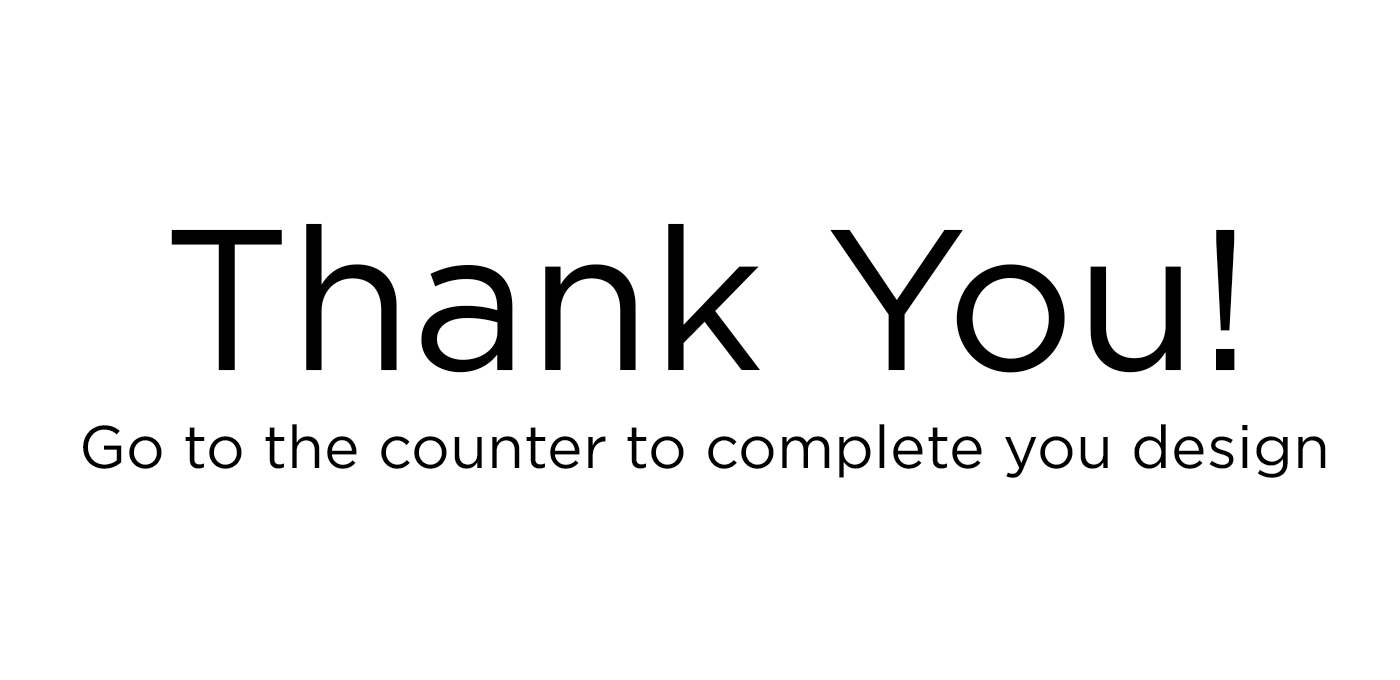
<style>
.page{position:relative;width:1400px;height:680px;background:#ffffff}
.page>*{position:absolute;margin:0}
.t1{font:200px "Gotham-Book";color:#000000}
.t2{font:60px "Gotham-Book";color:#000000}
</style>
<div class="page">
<p class="t1" style="left:171px;top:223px;width:1064px;height:150px">Thank You!</p>
<p class="t2" style="left:83px;top:424px;width:1243px;height:54px">Go to the counter to complete you design</p>
</div>
